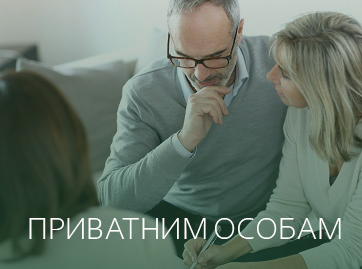
<style>
.page{position:relative;width:362px;height:269px}
.page>*{position:absolute;margin:0}
.t1{font:32px "CorbelLight";color:#ffffff}
</style>
<div class="page">
<p class="t1" style="left:29px;top:218px;width:312px;height:21px">ПРИВАТНИМ ОСОБАМ</p>
</div>
